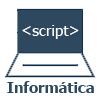
<style>
.page{position:relative;width:100px;height:100px;background:#ffffff}
.page>*{position:absolute;margin:0}
.t1{font:15.3px "Tahoma";color:#ffffff}
.t2{font:14.7px "Tahoma-Bold";color:#2e485f}
</style>
<div class="page">
<p class="t1" style="left:22px;top:25px;width:57px;height:14px">&lt;script&gt;</p>
<p class="t2" style="left:7px;top:81px;width:87px;height:12px">Informática</p>
</div>
